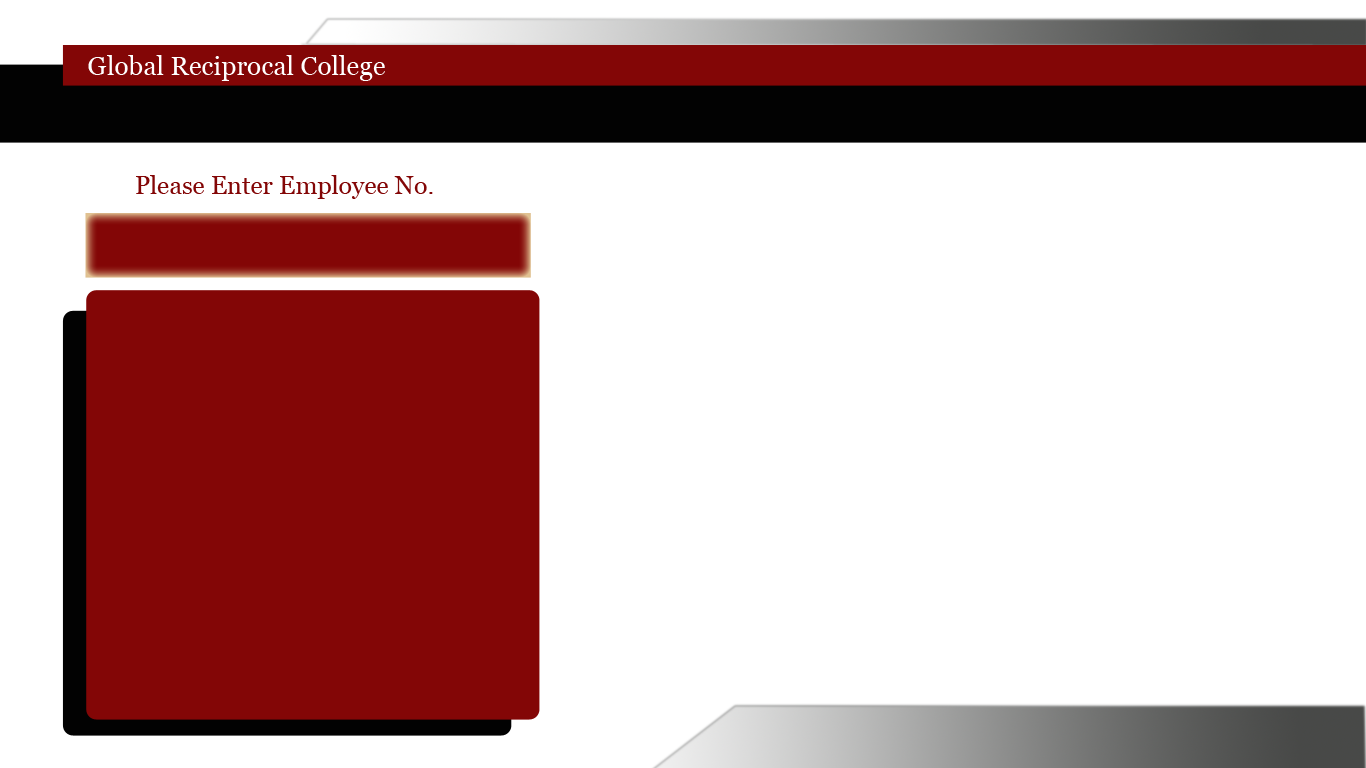
<style>
.page{position:relative;width:1366px;height:768px;background:#ffffff}
.page>*{position:absolute;margin:0}
.t1{font:26.3px "Georgia";color:#ffffff}
.t2{font:25px "Georgia";color:#830606}
</style>
<div class="page">
<p class="t1" style="left:88px;top:55px;width:297px;height:26px">Global Reciprocal College</p>
<p class="t2" style="left:136px;top:175px;width:297px;height:24px">Please Enter Employee No.</p>
</div>
